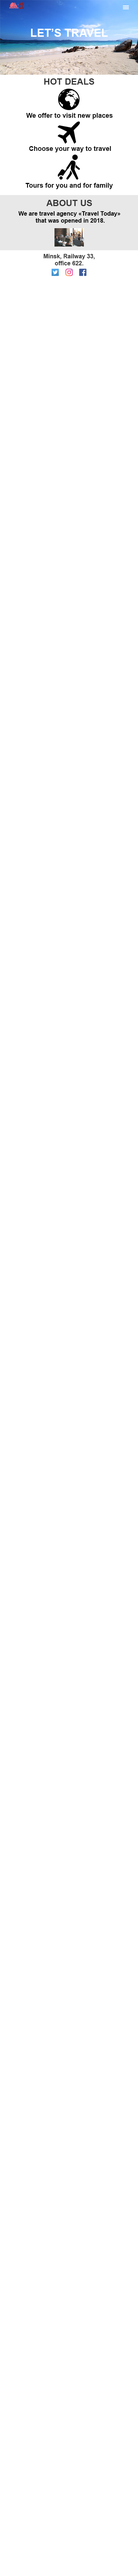
<style>
.page{position:relative;width:138px;height:2576px;background:#ffffff}
.page>*{position:absolute;margin:0}
.t1{font:11px "Arial-BoldMT";color:#ffffff}
.t2{font:8.8px "Arial-BoldMT";color:#353535}
.t3{font:6.6px "Arial-BoldMT";color:#000000}
.t4{font:5.9px "Arial-BoldMT";color:#000000}
.t5{font:5.9px "Arial-BoldMT";color:#353535}
</style>
<div class="page">
<p class="t1" style="left:31px;top:29px;width:77px;height:8px">LET’S TRAVEL</p>
<p class="t2" style="left:44px;top:78px;width:50px;height:7px">HOT DEALS</p>
<p class="t3" style="left:26px;top:113px;width:87px;height:6px">We offer to visit new places</p>
<p class="t3" style="left:29px;top:146px;width:82px;height:6px">Choose your way to travel</p>
<p class="t3" style="left:25px;top:183px;width:88px;height:6px">Tours for you and for family</p>
<p class="t2" style="left:46px;top:200px;width:46px;height:6px">ABOUT US</p>
<p class="t4" style="left:18px;top:211px;width:102px;height:13px;text-align:center">We are travel agency «Travel Today» <br>that was opened in 2018.</p>
<p class="t5" style="left:43px;top:254px;width:52px;height:11px;text-align:center">Minsk, Railway 33,<br>office 622.</p>
</div>
